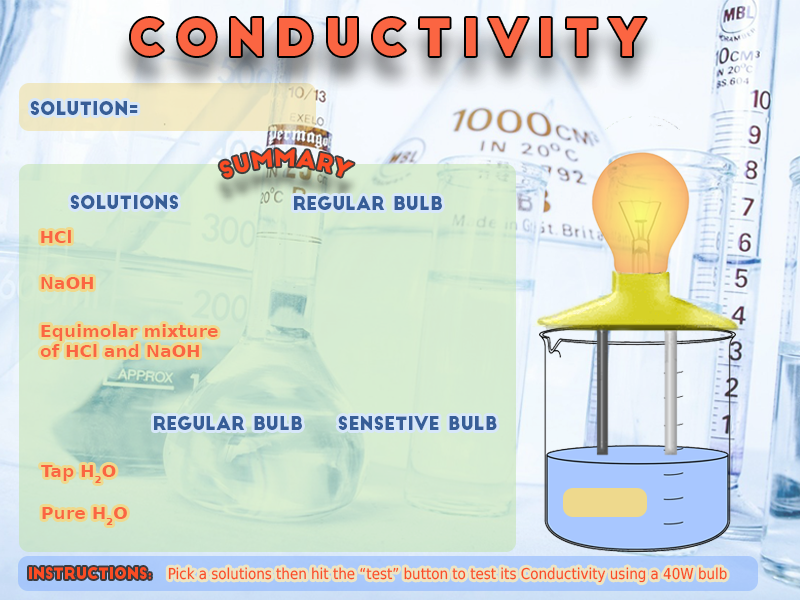
<style>
.page{position:relative;width:800px;height:600px}
.page>*{position:absolute;margin:0}
.t1{font:50px "BigJohn";letter-spacing:0.18em;color:#fb6542}
.t2{font:18px "BigJohn";color:#375e97}
.t3{font:22px "BigJohn";color:#fb4c23}
.t4{font:17px "DejaVuSans-Bold";color:#fb6542}
.t5{font:15px "BigJohn";color:#fb4c23}
.t6{font:15px "DejaVuSansCondensed";color:#fb4c23}
</style>
<div class="page">
<p class="t1" style="left:131px;top:18px;width:515px;height:38px">conductivity</p>
<p class="t2" style="left:30px;top:101px;width:108px;height:14px">Solution=</p>
<p class="t3" style="left:219px;top:149px;width:135px;height:29px">Summary</p>
<p class="t2" style="left:70px;top:195px;width:108px;height:14px">SolutionS</p>
<p class="t2" style="left:294px;top:196px;width:148px;height:14px">Regular Bulb</p>
<p class="t4" style="left:41px;top:230px;width:30px;height:13px">HCl</p>
<p class="t4" style="left:41px;top:277px;width:52px;height:12px">NaOH</p>
<p class="t4" style="left:40px;top:324px;width:178px;height:33px">Equimolar mixture <br>of HCl and NaOH</p>
<p class="t2" style="left:154px;top:416px;width:148px;height:14px">Regular Bulb</p>
<p class="t2" style="left:338px;top:416px;width:159px;height:14px">Sensetive Bulb</p>
<p class="t4" style="left:41px;top:465px;width:75px;height:18px">Tap H2O</p>
<p class="t4" style="left:42px;top:507px;width:85px;height:18px">Pure H2O</p>
<p class="t5" style="left:29px;top:567px;width:122px;height:12px">Instructions:</p>
<p class="t6" style="left:168px;top:567px;width:559px;height:16px">Pick a solutions then hit the “test” button to test its Conductivity using a 40W bulb</p>
</div>
